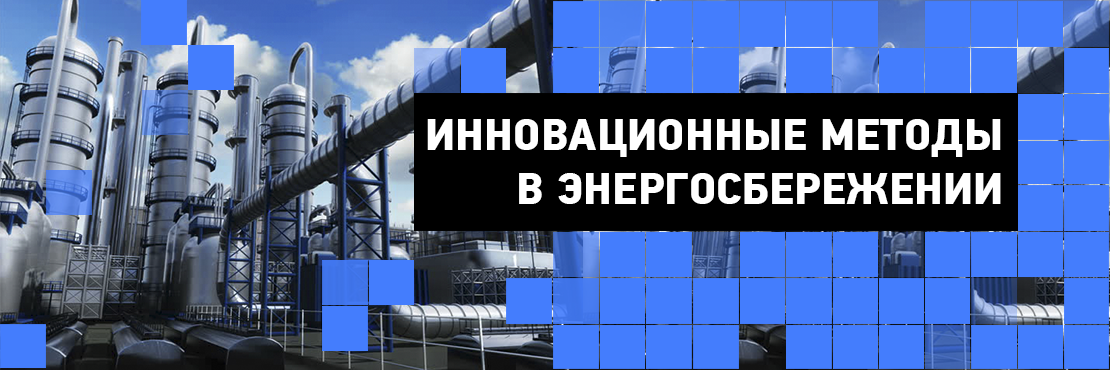
<style>
.page{position:relative;width:1110px;height:370px;background:#447dfd}
.page>*{position:absolute;margin:0}
.t1{font:44.6px "PFDinTextCondPro-Bold";color:#ffffff;text-transform:uppercase;scale:1.15 1}
</style>
<div class="page">
<p class="t1" style="left:427px;top:119px;width:574px;height:85px;text-align:right">инновационные методы<br>в Энергосбережении</p>
</div>
